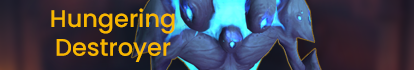
<style>
.page{position:relative;width:414px;height:70px}
.page>*{position:absolute;margin:0}
.t1{font:24px "Poppins-Medium";color:#f8b700}
</style>
<div class="page">
<p class="t1" style="left:51px;top:8px;width:124px;height:54px;text-align:center">Hungering<br>Destroyer</p>
</div>
